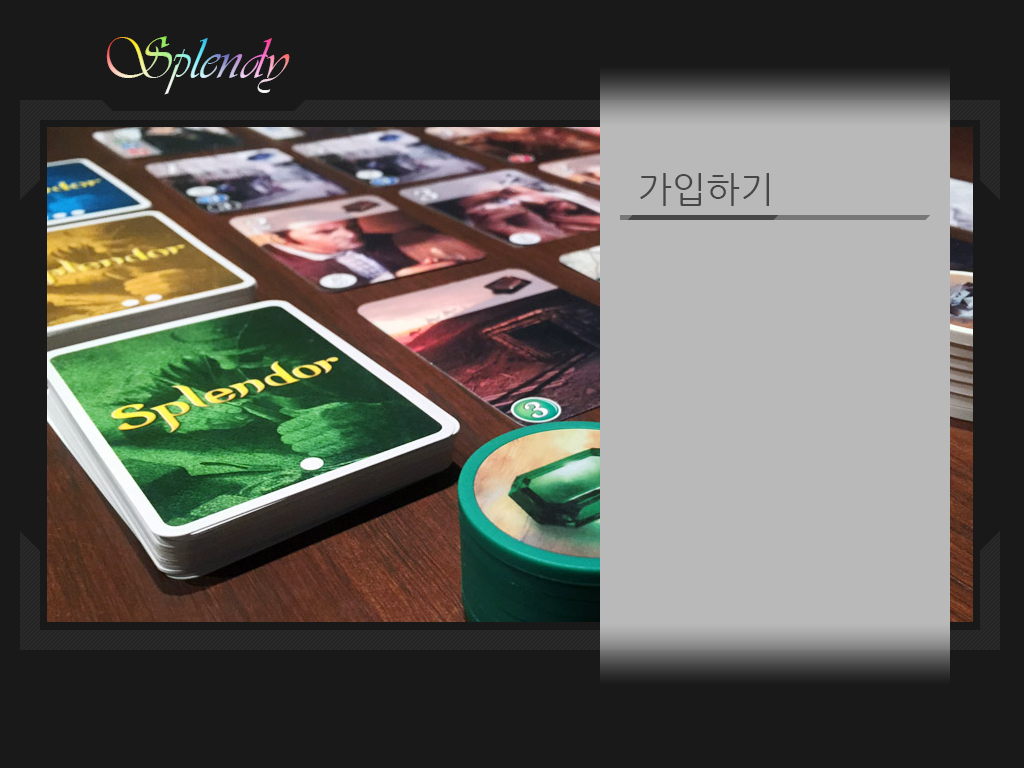
<style>
.page{position:relative;width:1024px;height:768px;background:#191919}
.page>*{position:absolute;margin:0}
.t1{font:60px "Vivaldii"}
.t2{font:36px "NanumGothic";color:#464746}
</style>
<div class="page">
<p class="t1" style="left:106px;top:36px;width:184px;height:59px">Splendy</p>
<p class="t2" style="left:640px;top:173px;width:129px;height:33px">가입하기</p>
</div>
